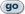
<style>
.page{position:relative;width:25px;height:14px}
.page>*{position:absolute;margin:0}
.t1{font:10px "FrutigerBlack";color:#103852}
</style>
<div class="page">
<p class="t1" style="left:5px;top:3px;width:14px;height:9px">go</p>
</div>
